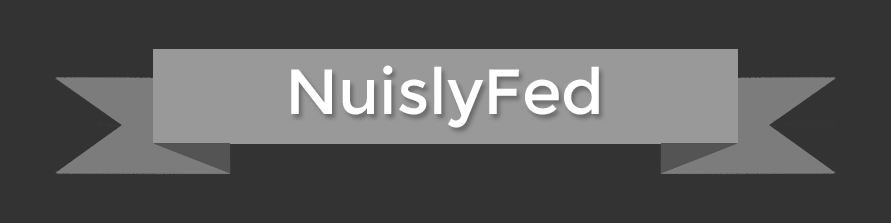
<style>
.page{position:relative;width:891px;height:223px;background:#333333}
.page>*{position:absolute;margin:0}
.t1{font:63.9px "Montserrat-Regular";color:#ffffff}
</style>
<div class="page">
<p class="t1" style="left:291px;top:65px;width:308px;height:63px">NuislyFed</p>
</div>
